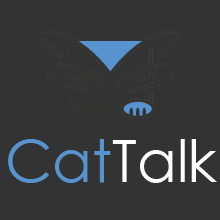
<style>
.page{position:relative;width:220px;height:220px;background:#333333}
.page>*{position:absolute;margin:0}
.t1{font:58.3px "STXihei";color:#ffffff}
.t2{font:58.3px "STXihei";color:#5794cf}
</style>
<div class="page">
<p class="t1" style="left:8px;top:139px;width:209px;height:44px"><span class="t2">Cat</span>Talk</p>
</div>
